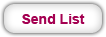
<style>
.page{position:relative;width:106px;height:37px}
.page>*{position:absolute;margin:0}
.t1{font:14px "Arial-BoldMT";color:#a40051}
</style>
<div class="page">
<p class="t1" style="left:22px;top:14px;width:63px;height:10px">Send List</p>
</div>
